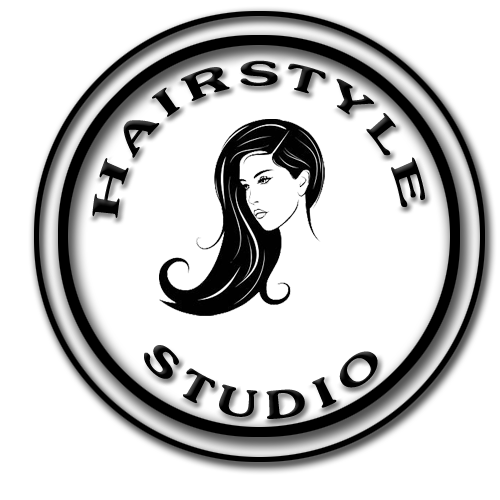
<style>
.page{position:relative;width:500px;height:500px;background:#ffffff}
.page>*{position:absolute;margin:0}
.t1{font:60.3px/144.5px "SouvenirITCbyBT-Demi";letter-spacing:0.15em;color:#000000;scale:1.04 1}
.t2{font:65.8px "SouvenirITCbyBT-Demi";letter-spacing:0.15em;color:#000000;scale:1.04 1}
</style>
<div class="page">
<p class="t1" style="left:92px;top:60px;width:333px;height:158px;text-align:center">HAIRSTYLE</p>
<p class="t2" style="left:144px;top:345px;width:234px;height:74px">STUDIO</p>
</div>
